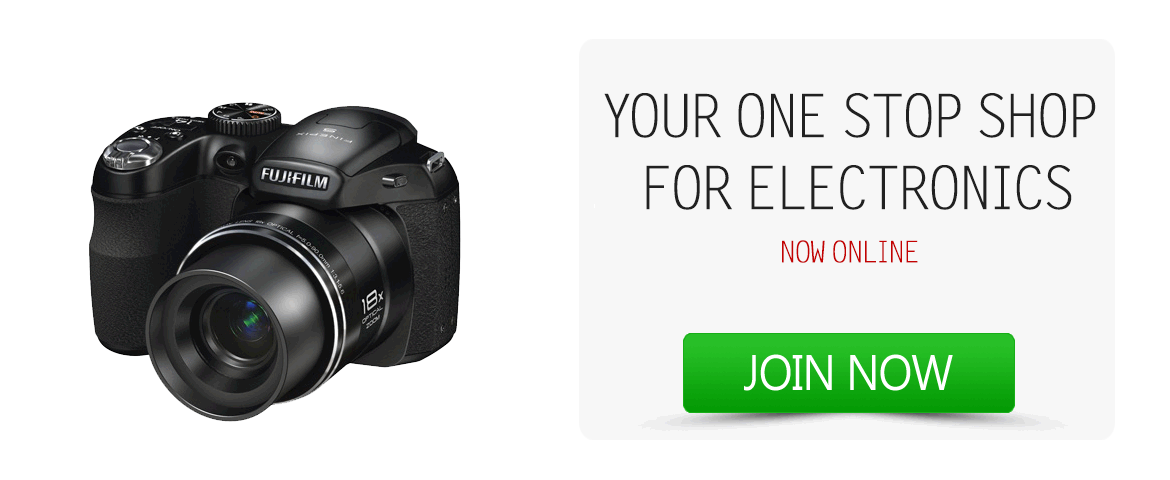
<style>
.page{position:relative;width:1170px;height:480px;background:#ffffff}
.page>*{position:absolute;margin:0}
.t1{font:60px "Zomnk";color:#212121}
.t2{font:30px "Zomnk";color:#c40202}
</style>
<div class="page">
<p class="t1" style="left:604px;top:93px;width:492px;height:117px;text-align:center">Your One Stop Shop <br>for electronics</p>
<p class="t2" style="left:782px;top:240px;width:136px;height:23px">Now online</p>
</div>
